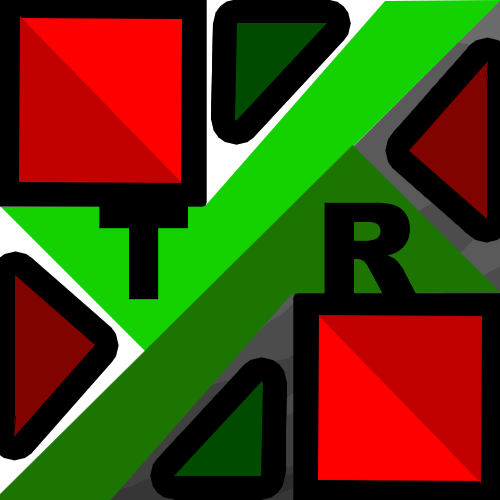
<style>
.page{position:relative;width:500px;height:500px;background:#000000}
.page>*{position:absolute;margin:0}
.t1{font:131.8px "Arial-Black";letter-spacing:-0.05em;color:#000000}
</style>
<div class="page">
<p class="t1" style="left:99px;top:204px;width:89px;height:96px">T</p>
<p class="t1" style="left:324px;top:202px;width:94px;height:96px">R</p>
</div>
